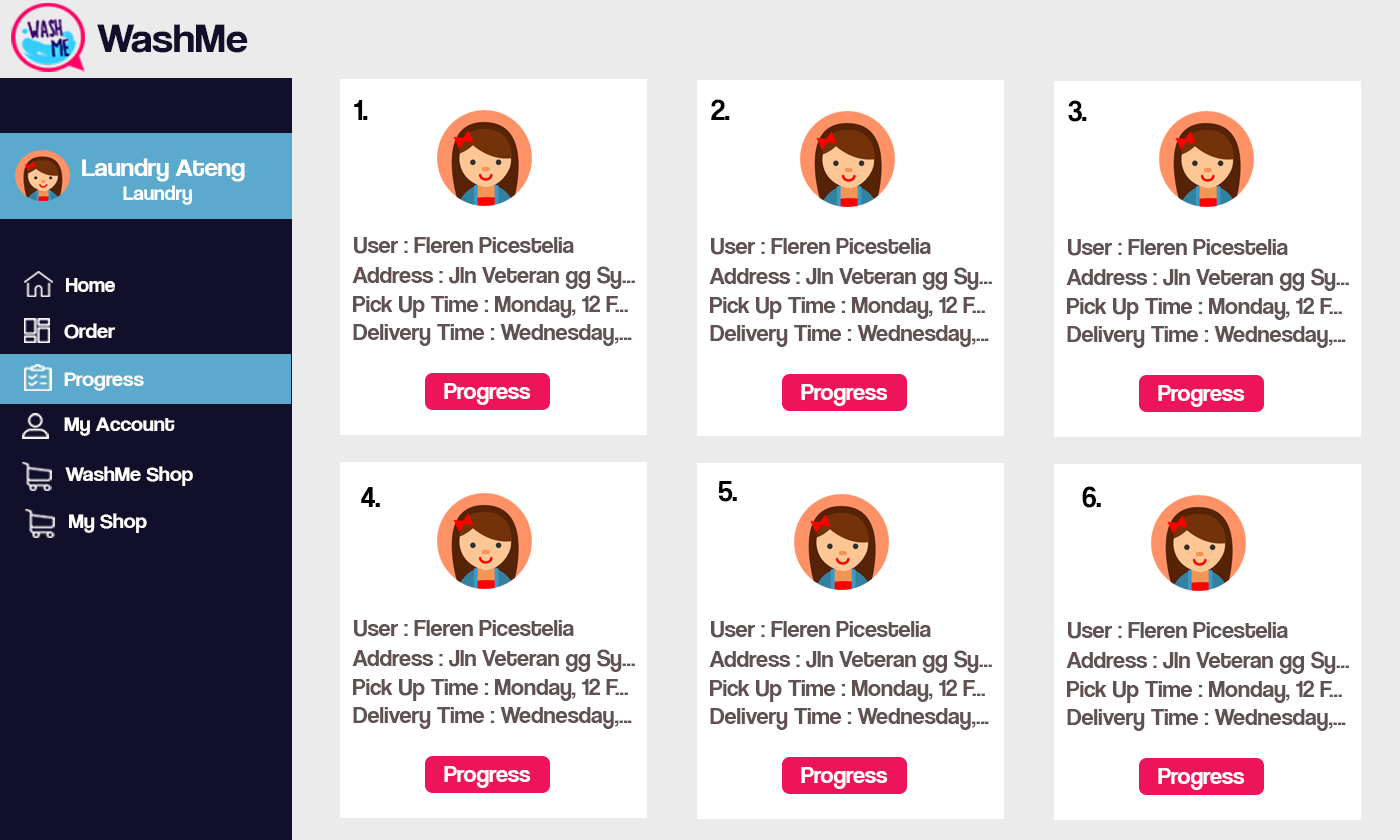
<style>
.page{position:relative;width:1400px;height:840px;background:#ffffff}
.page>*{position:absolute;margin:0}
.t1{font:42.1px "CoolveticaRg-Regular";color:#120f2b;scale:1.05 1}
.t2{font:30px "CoolveticaRg-Regular";color:#000000}
.t3{font:25.2px "CoolveticaRg-Regular";color:#ffffff;scale:1.05 1}
.t4{font:20px "CoolveticaRg-Regular";color:#ffffff;scale:1.05 1}
.t5{font:24px "CoolveticaRg-Regular";color:#605252}
.t6{font:21px "CoolveticaRg-Regular";color:#ffffff}
.t7{font:21px "CoolveticaRg-Regular";color:#ffffff;scale:1.05 1}
.t8{font:24px "CoolveticaRg-Regular";color:#ffffff}
</style>
<div class="page">
<p class="t1" style="left:97px;top:24px;width:151px;height:29px">WashMe</p>
<p class="t2" style="left:354px;top:100px;width:14px;height:20px">1.</p>
<p class="t2" style="left:711px;top:99px;width:19px;height:21px">2.</p>
<p class="t2" style="left:1068px;top:100px;width:19px;height:22px">3.</p>
<p class="t3" style="left:82px;top:158px;width:163px;height:47px">Laundry Ateng<br><span class="t4">        Laundry</span></p>
<p class="t5" style="left:354px;top:237px;width:220px;height:17px">User : Fleren Picestelia</p>
<p class="t5" style="left:711px;top:238px;width:220px;height:17px">User : Fleren Picestelia</p>
<p class="t5" style="left:1068px;top:239px;width:220px;height:17px">User : Fleren Picestelia</p>
<p class="t5" style="left:352px;top:266px;width:283px;height:23px">Address : Jln Veteran gg Sy...</p>
<p class="t5" style="left:709px;top:267px;width:283px;height:23px">Address : Jln Veteran gg Sy...</p>
<p class="t5" style="left:1066px;top:268px;width:283px;height:23px">Address : Jln Veteran gg Sy...</p>
<p class="t6" style="left:66px;top:278px;width:49px;height:14px">Home</p>
<p class="t5" style="left:353px;top:295px;width:275px;height:23px">Pick Up Time : Monday, 12 F...</p>
<p class="t5" style="left:710px;top:296px;width:275px;height:23px">Pick Up Time : Monday, 12 F...</p>
<p class="t5" style="left:1067px;top:297px;width:275px;height:23px">Pick Up Time : Monday, 12 F...</p>
<p class="t7" style="left:64px;top:323px;width:51px;height:16px">Order</p>
<p class="t5" style="left:353px;top:324px;width:279px;height:22px">Delivery Time : Wednesday,...</p>
<p class="t5" style="left:710px;top:325px;width:279px;height:22px">Delivery Time : Wednesday,...</p>
<p class="t5" style="left:1067px;top:326px;width:279px;height:22px">Delivery Time : Wednesday,...</p>
<p class="t7" style="left:64px;top:372px;width:80px;height:19px">Progress</p>
<p class="t8" style="left:444px;top:383px;width:87px;height:22px">Progress</p>
<p class="t8" style="left:801px;top:384px;width:87px;height:22px">Progress</p>
<p class="t8" style="left:1158px;top:385px;width:87px;height:22px">Progress</p>
<p class="t7" style="left:64px;top:417px;width:111px;height:19px">My Account</p>
<p class="t7" style="left:65px;top:466px;width:128px;height:20px">WashMe Shop</p>
<p class="t2" style="left:718px;top:481px;width:19px;height:21px">5.</p>
<p class="t2" style="left:1082px;top:486px;width:19px;height:22px">6.</p>
<p class="t2" style="left:361px;top:487px;width:19px;height:20px">4.</p>
<p class="t7" style="left:69px;top:513px;width:78px;height:20px">My Shop</p>
<p class="t5" style="left:354px;top:620px;width:220px;height:17px">User : Fleren Picestelia</p>
<p class="t5" style="left:711px;top:621px;width:220px;height:17px">User : Fleren Picestelia</p>
<p class="t5" style="left:1068px;top:622px;width:220px;height:17px">User : Fleren Picestelia</p>
<p class="t5" style="left:352px;top:649px;width:283px;height:23px">Address : Jln Veteran gg Sy...</p>
<p class="t5" style="left:709px;top:650px;width:283px;height:23px">Address : Jln Veteran gg Sy...</p>
<p class="t5" style="left:1066px;top:651px;width:283px;height:23px">Address : Jln Veteran gg Sy...</p>
<p class="t5" style="left:353px;top:678px;width:275px;height:23px">Pick Up Time : Monday, 12 F...</p>
<p class="t5" style="left:710px;top:679px;width:275px;height:23px">Pick Up Time : Monday, 12 F...</p>
<p class="t5" style="left:1067px;top:680px;width:275px;height:23px">Pick Up Time : Monday, 12 F...</p>
<p class="t5" style="left:353px;top:707px;width:279px;height:22px">Delivery Time : Wednesday,...</p>
<p class="t5" style="left:710px;top:708px;width:279px;height:22px">Delivery Time : Wednesday,...</p>
<p class="t5" style="left:1067px;top:709px;width:279px;height:22px">Delivery Time : Wednesday,...</p>
<p class="t8" style="left:444px;top:766px;width:87px;height:22px">Progress</p>
<p class="t8" style="left:801px;top:767px;width:87px;height:22px">Progress</p>
<p class="t8" style="left:1158px;top:768px;width:87px;height:22px">Progress</p>
</div>
